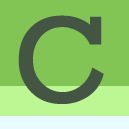
<style>
.page{position:relative;width:129px;height:129px;background:#82c555}
.page>*{position:absolute;margin:0}
.t1{font:126.2px "Rockwell";color:#445544}
</style>
<div class="page">
<p class="t1" style="left:18px;top:15px;width:86px;height:89px">C</p>
</div>
